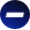
<style>
.page{position:relative;width:30px;height:30px}
.page>*{position:absolute;margin:0}
.t1{font:72px "MinionPro-Medium";color:#fbfcff}
</style>
<div class="page">
<p class="t1" style="left:6px;top:12px;width:18px;height:5px">-</p>
</div>
